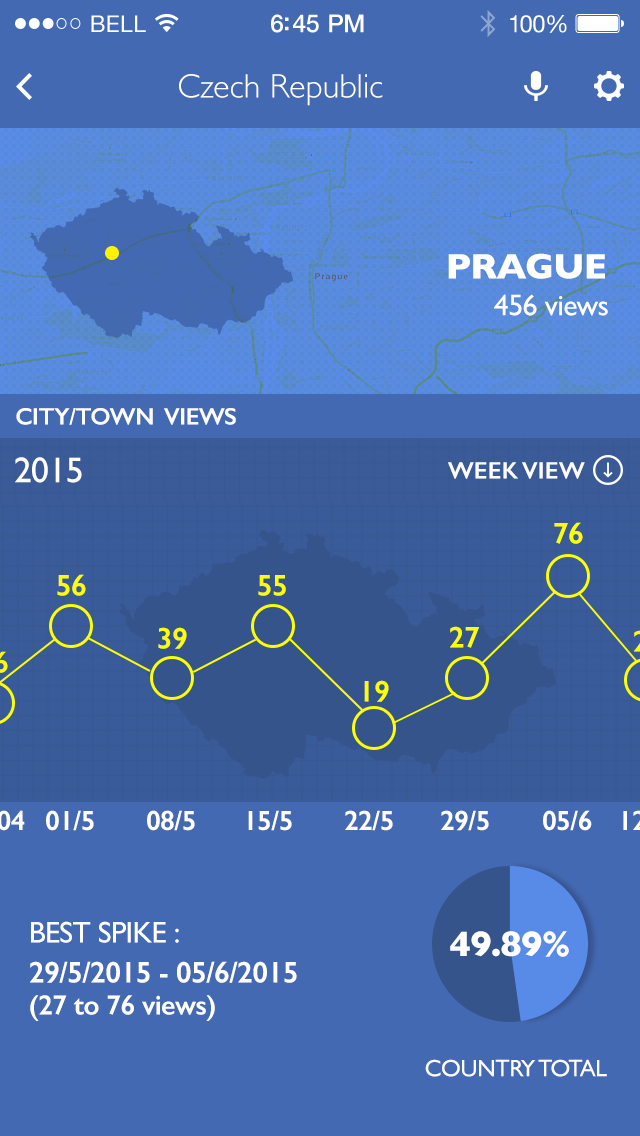
<style>
.page{position:relative;width:640px;height:1136px;background:#4369b2}
.page>*{position:absolute;margin:0}
.t1{font:34px "GillSans-Light";color:#ffffff}
.t2{font:36px "GillSans-Bold";letter-spacing:-0.02em;color:#ffffff}
.t3{font:30px "GillSans";letter-spacing:-0.02em;color:#ffffff}
.t4{font:24px "GillSans-SemiBold";letter-spacing:-0.02em;color:#ffffff}
.t5{font:36px "GillSans";letter-spacing:-0.02em;color:#ffffff;text-transform:uppercase}
.t6{font:24px "GillSans-SemiBold";color:#ffffff}
.t7{font:30px "GillSans-SemiBold";letter-spacing:-0.02em;color:#fcff02;text-transform:uppercase}
.t8{font:28px "GillSans-SemiBold";letter-spacing:-0.02em;color:#ffffff;text-transform:uppercase}
.t9{font:30px "GillSans";letter-spacing:-0.02em;color:#ffffff;text-transform:uppercase}
.t10{font:30px "GillSans-SemiBold";letter-spacing:-0.02em;color:#ffffff;text-transform:uppercase}
.t11{font:28px "GillSans-SemiBold";letter-spacing:-0.02em;color:#ffffff}
.t12{font:24px "GillSans";letter-spacing:-0.02em;color:#ffffff;text-transform:uppercase}
</style>
<div class="page">
<p class="t1" style="left:179px;top:74px;width:204px;height:32px">Czech Republic</p>
<p class="t2" style="left:448px;top:253px;width:157px;height:26px">PRAGUE</p>
<p class="t3" style="left:494px;top:294px;width:114px;height:22px">456 views</p>
<p class="t4" style="left:16px;top:408px;width:220px;height:17px">CITY/TOWN  VIEWS</p>
<p class="t5" style="left:15px;top:457px;width:67px;height:26px">2015</p>
<p class="t6" style="left:448px;top:462px;width:137px;height:17px">WEEK VIEW</p>
<p class="t7" style="left:554px;top:522px;width:29px;height:22px">76</p>
<p class="t7" style="left:57px;top:574px;width:29px;height:22px">56</p>
<p class="t7" style="left:258px;top:575px;width:28px;height:21px">55</p>
<p class="t7" style="left:158px;top:627px;width:29px;height:22px">39</p>
<p class="t7" style="left:450px;top:626px;width:29px;height:22px">27</p>
<p class="t7" style="left:364px;top:680px;width:25px;height:22px">19</p>
<p class="t8" style="left:46px;top:810px;width:48px;height:21px">01/5</p>
<p class="t8" style="left:147px;top:810px;width:48px;height:21px">08/5</p>
<p class="t8" style="left:248px;top:810px;width:44px;height:21px">15/5</p>
<p class="t8" style="left:345px;top:810px;width:48px;height:21px">22/5</p>
<p class="t8" style="left:441px;top:810px;width:48px;height:21px">29/5</p>
<p class="t8" style="left:543px;top:810px;width:49px;height:21px">05/6</p>
<p class="t9" style="left:31px;top:921px;width:148px;height:22px">Best spike :</p>
<p class="t2" style="left:450px;top:931px;width:119px;height:26px">49.89%</p>
<p class="t10" style="left:30px;top:961px;width:267px;height:22px">29/5/2015 - 05/6/2015</p>
<p class="t11" style="left:30px;top:995px;width:185px;height:26px"><span class="t8">(27 </span>to 76 views)</p>
<p class="t12" style="left:425px;top:1059px;width:182px;height:18px">country total</p>
</div>
